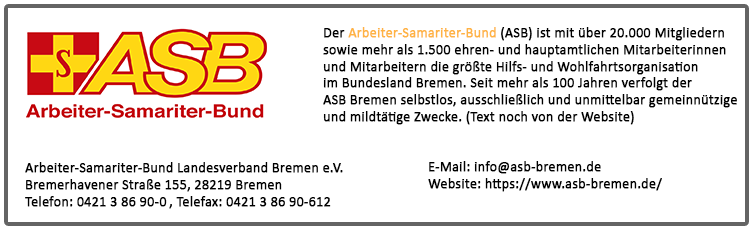
<style>
.page{position:relative;width:754px;height:232px;background:#ffffff}
.page>*{position:absolute;margin:0}
.t1{font:14px "Calibri";color:#000000;font-weight:bold}
.t2{font:14px "Calibri";color:#ffb343;font-weight:bold}
</style>
<div class="page">
<p class="t1" style="left:323px;top:27px;width:414px;height:98px">Der <span class="t2">Arbeiter-Samariter-Bund </span>(ASB) ist mit über 20.000 Mitgliedern <br>sowie mehr als 1.500 ehren- und hauptamtlichen Mitarbeiterinnen <br>und Mitarbeitern die größte Hilfs- und Wohlfahrtsorganisation <br>im Bundesland Bremen. Seit mehr als 100 Jahren verfolgt der <br>ASB Bremen selbstlos, ausschließlich und unmittelbar gemeinnützige <br>und mildtätige Zwecke. (Text noch von der Website)</p>
<p class="t1" style="left:428px;top:161px;width:234px;height:31px">E-Mail: info@asb-bremen.de<br>Website: https://www.asb-bremen.de/</p>
<p class="t1" style="left:25px;top:162px;width:318px;height:47px">Arbeiter-Samariter-Bund Landesverband Bremen e.V. <br>Bremerhavener Straße 155, 28219 Bremen<br>Telefon: 0421 3 86 90-0 , Telefax: 0421 3 86 90-612</p>
</div>
